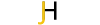
<style>
.page{position:relative;width:100px;height:25px;background:#ffffff}
.page>*{position:absolute;margin:0}
.t1{font:25px "OpenSans";color:#f4c513;font-weight:bold}
.t2{font:2px "OpenSans";color:#f4c513;font-weight:bold}
.t3{font:25px "OpenSans";color:#000000;font-weight:bold}
.t4{font:2px "OpenSans";color:#000000;font-weight:bold}
</style>
<div class="page">
<p class="t1" style="left:38px;top:1px;width:7px;height:24px"><span class="t2"> </span>J</p>
<p class="t3" style="left:42px;top:1px;width:15px;height:19px"><span class="t4"> </span>H</p>
</div>
